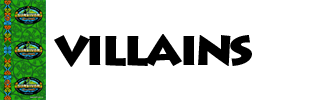
<style>
.page{position:relative;width:309px;height:100px;background:#ffffff}
.page>*{position:absolute;margin:0}
.t1{font:48.3px "LithosPro-Black";letter-spacing:-0.075em;color:#000000}
</style>
<div class="page">
<p class="t1" style="left:54px;top:34px;width:198px;height:33px">villains</p>
</div>
